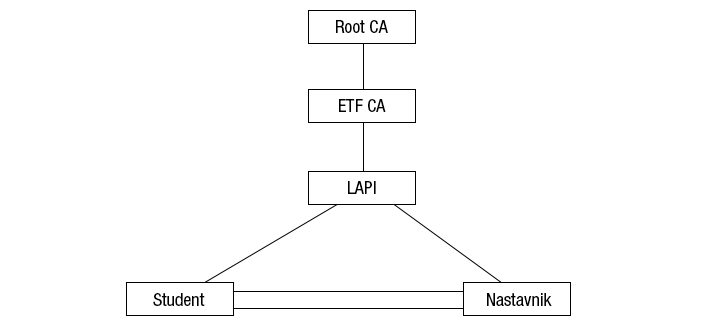
<style>
.page{position:relative;width:727px;height:330px;background:#ffffff}
.page>*{position:absolute;margin:0}
.t1{font:18px "HelveticaNeueLTStd-Cn";color:#000000}
</style>
<div class="page">
<p class="t1" style="left:336px;top:20px;width:52px;height:13px">Root CA</p>
<p class="t1" style="left:339px;top:99px;width:47px;height:13px">ETF CA</p>
<p class="t1" style="left:348px;top:181px;width:28px;height:13px">LAPI</p>
<p class="t1" style="left:153px;top:293px;width:52px;height:13px">Student</p>
<p class="t1" style="left:487px;top:293px;width:65px;height:13px">Nastavnik</p>
</div>
